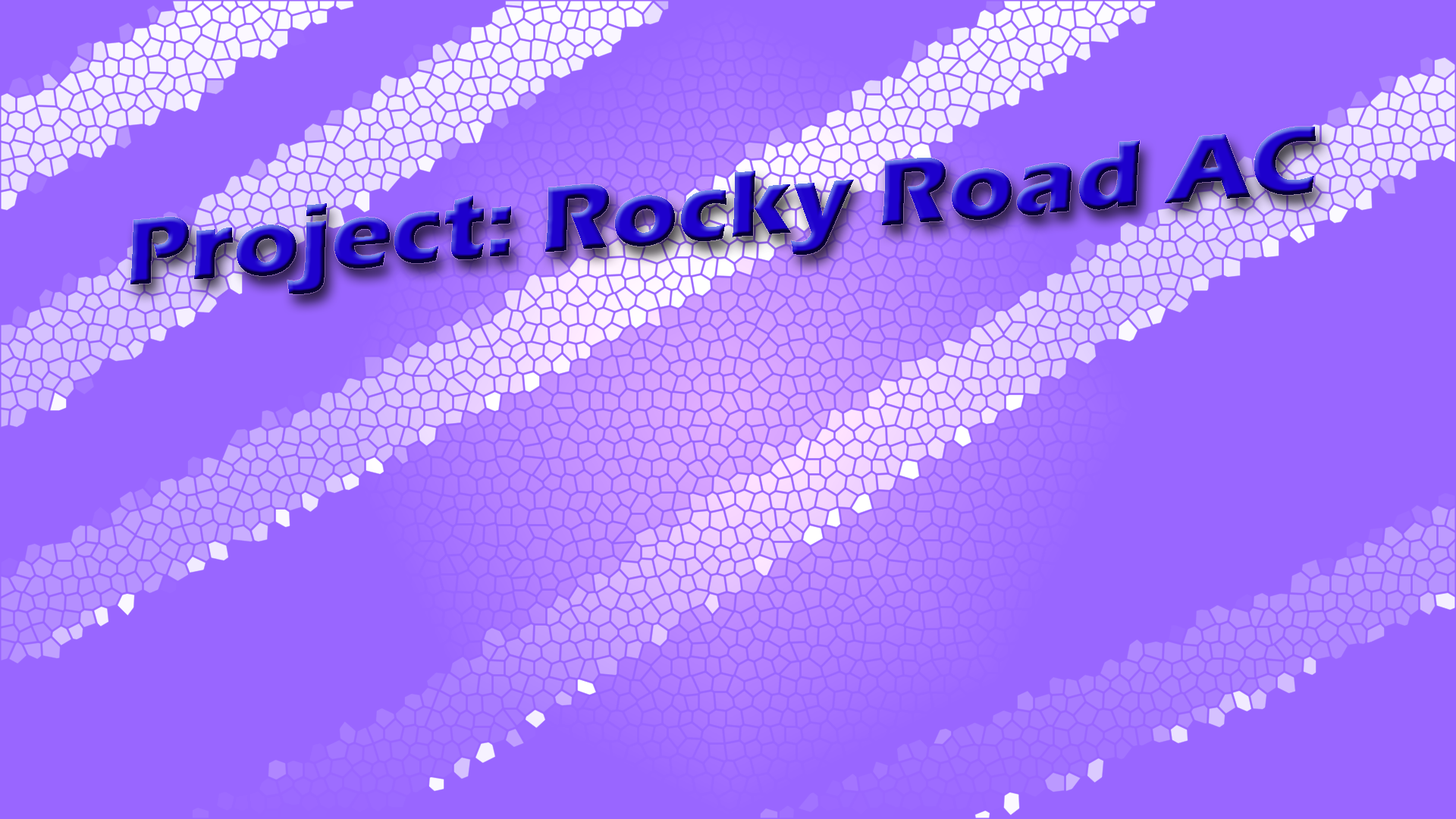
<style>
.page{position:relative;width:1456px;height:819px;background:#9966ff}
.page>*{position:absolute;margin:0}
.t1{font:97.1px "ErasITC-Bold";scale:1.05 1}
</style>
<div class="page">
<p class="t1" style="left:130px;top:127px;width:1186px;height:167px;rotate:-4deg">Project: Rocky Road AC</p>
</div>
